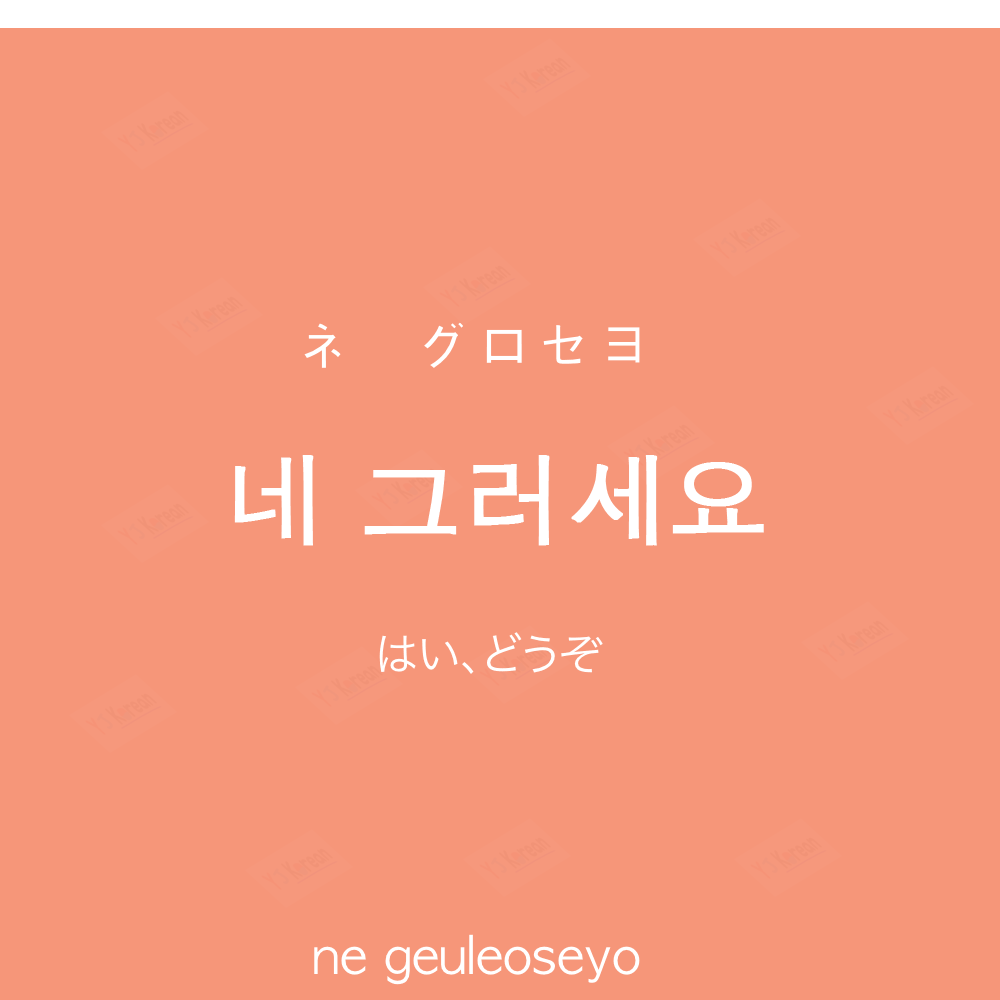
<style>
.page{position:relative;width:1000px;height:1000px;background:#f69679}
.page>*{position:absolute;margin:0}
.t1{font:60px "AppleGothic";color:#ffffff}
.t2{font:100px "AppleGothic";color:#ffffff;font-weight:bold}
.t3{font:45px "HiraKakuProN-W3";color:#ffffff}
.t4{font:50px "AppleGothic";color:#ffffff}
</style>
<div class="page">
<p class="t1" style="left:304px;top:322px;width:336px;height:46px">ネ　グロセヨ</p>
<p class="t2" style="left:234px;top:455px;width:530px;height:91px">네 그러세요</p>
<p class="t3" style="left:379px;top:632px;width:224px;height:42px">はい、どうぞ</p>
<p class="t4" style="left:314px;top:934px;width:326px;height:51px">ne geuleoseyo</p>
</div>
